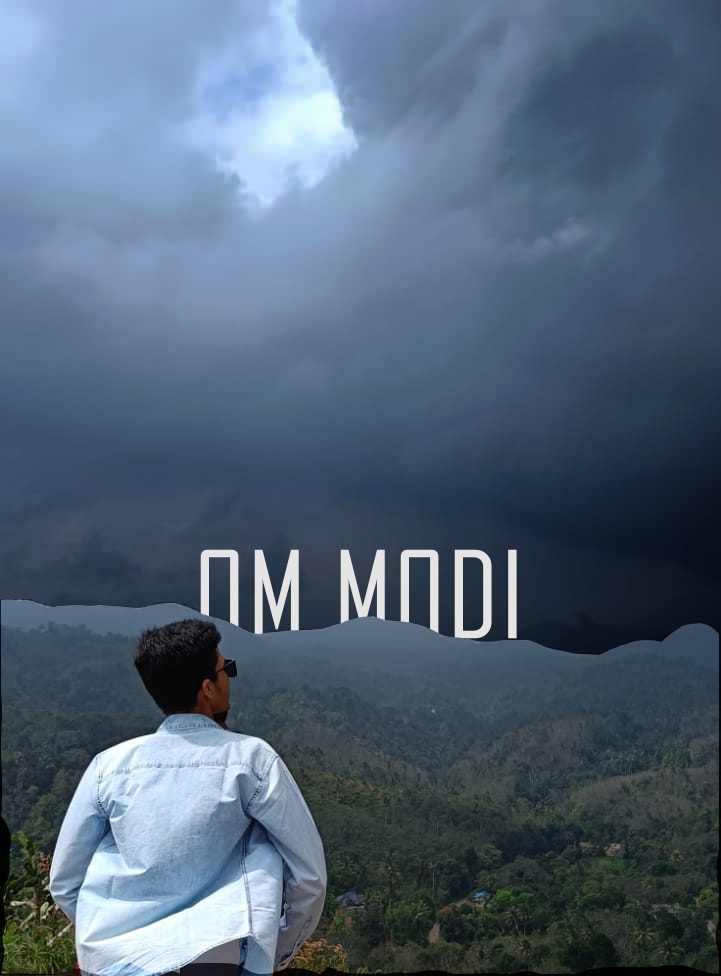
<style>
.page{position:relative;width:721px;height:976px}
.page>*{position:absolute;margin:0}
.t1{font:114.5px "AgencyFB-Reg";color:#e4e4e4;font-weight:bold;text-decoration:underline}
</style>
<div class="page">
<p class="t1" style="left:193px;top:549px;width:335px;height:111px">OM MODI</p>
</div>
